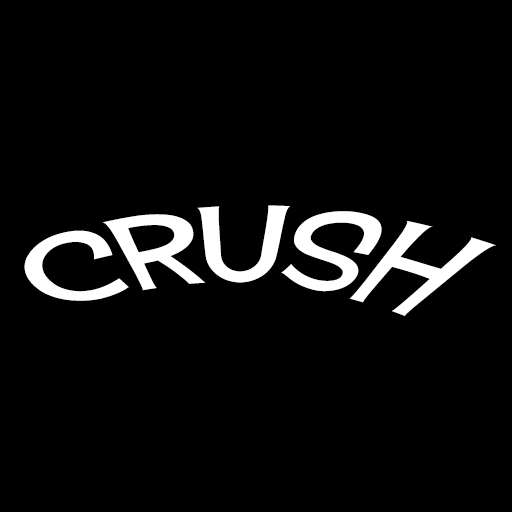
<style>
.page{position:relative;width:512px;height:512px;background:#000000}
.page>*{position:absolute;margin:0}
.t1{font:92.3px "CherryCreamSoda";letter-spacing:0.025em;color:#ffffff;scale:0.91 1}
</style>
<div class="page">
<p class="t1" style="left:24px;top:205px;width:472px;height:111px">CRUSH</p>
</div>
